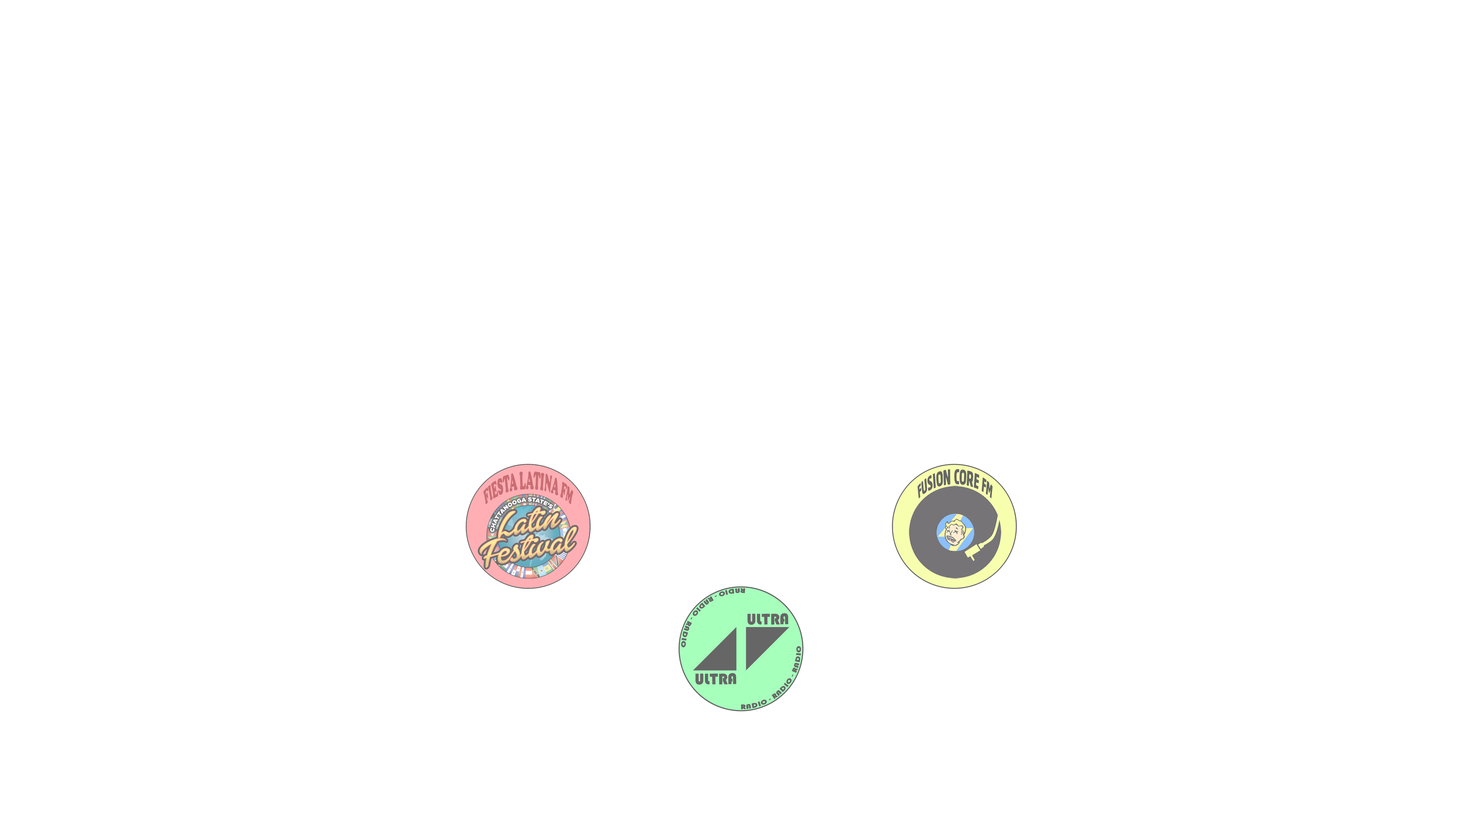
<style>
.page{position:relative;width:1484px;height:835px;background:#ffffff}
.page>*{position:absolute;margin:0}
.t1{font:7px "CooperBlack";color:#ca6e74}
.t2{font:11px "Gothic821CondensedBT-Regular";color:#666666}
.t3{font:7px "Bauhaus93";color:#666666}
.t4{font:16.2px "Bauhaus93";color:#666666}
</style>
<div class="page">
<p class="t1" style="left:483px;top:471px;width:91px;height:33px;text-align:center">FIESTA LATINA FM</p>
<p class="t2" style="left:918px;top:469px;width:75px;height:29px;text-align:center">FUSION CORE FM</p>
<p class="t3" style="left:681px;top:588px;width:65px;height:59px;rotate:138deg">RADIO - RADIO - RADIO</p>
<p class="t4" style="left:747px;top:613px;width:42px;height:12px;rotate:-1deg">ULTRA</p>
<p class="t3" style="left:741px;top:646px;width:60px;height:63px;rotate:-46deg">RADIO - RADIO - RADIO</p>
<p class="t4" style="left:695px;top:673px;width:42px;height:12px;rotate:-1deg">ULTRA</p>
</div>
